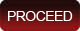
<style>
.page{position:relative;width:80px;height:31px}
.page>*{position:absolute;margin:0}
.t1{font:14px "ArialMT";letter-spacing:-0.04em;color:#ffffff}
</style>
<div class="page">
<p class="t1" style="left:8px;top:11px;width:65px;height:10px">PROCEED</p>
</div>
